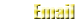
<style>
.page{position:relative;width:75px;height:25px;background:#ffffff}
.page>*{position:absolute;margin:0}
.t1{font:18.7px "Impact"}
</style>
<div class="page">
<p class="t1" style="left:34px;top:4px;width:41px;height:15px">Email</p>
</div>
